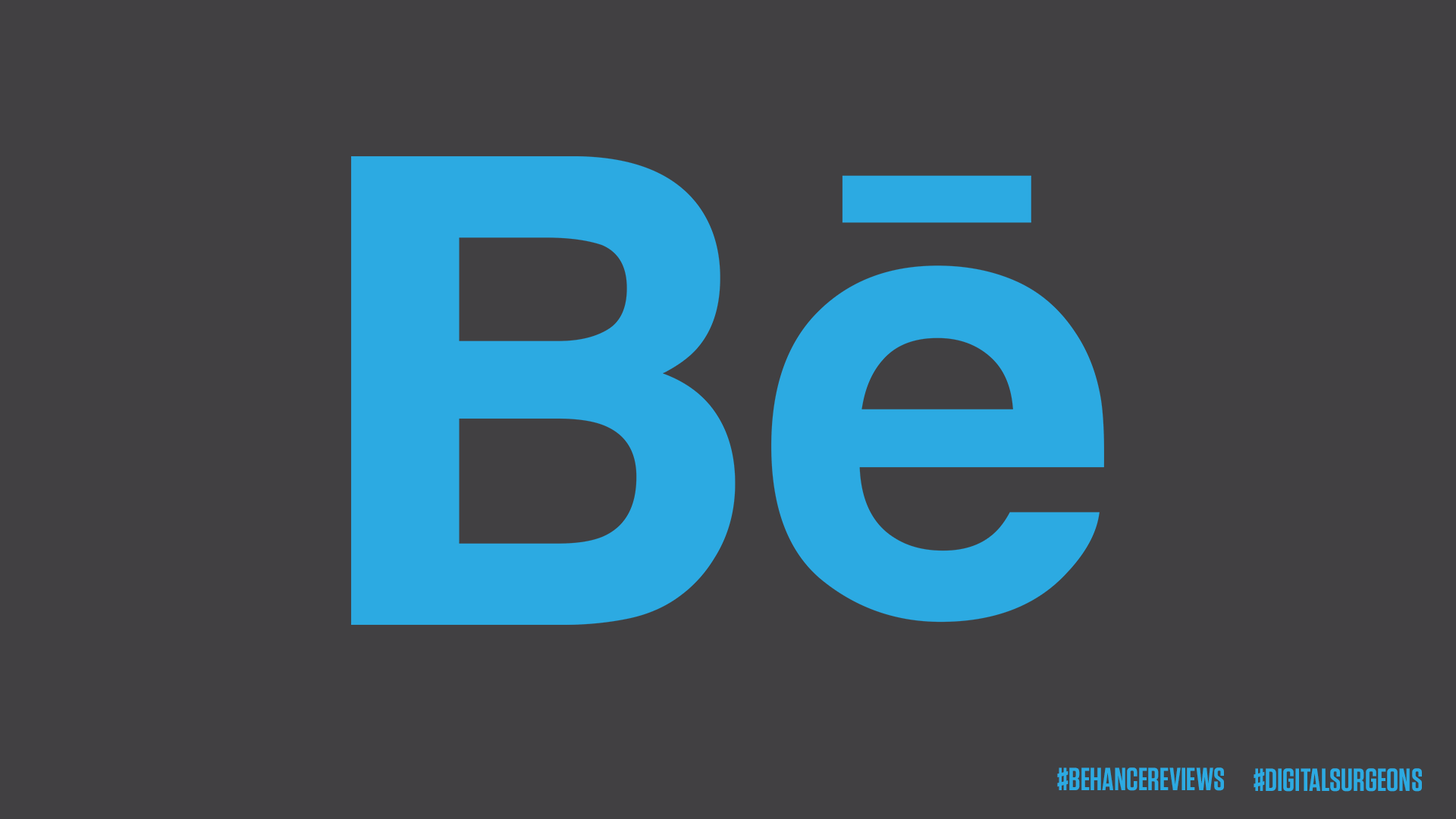
<style>
.page{position:relative;width:1456px;height:819px;background:#414042}
.page>*{position:absolute;margin:0}
.t1{font:32.1px "Tungsten-Semibold";color:#2caae2;text-transform:uppercase}
</style>
<div class="page">
<p class="t1" style="left:1057px;top:767px;width:167px;height:24px">#BEHANCEREVIEWS</p>
<p class="t1" style="left:1254px;top:768px;width:168px;height:24px">#DIGITALSURGEONS</p>
</div>
